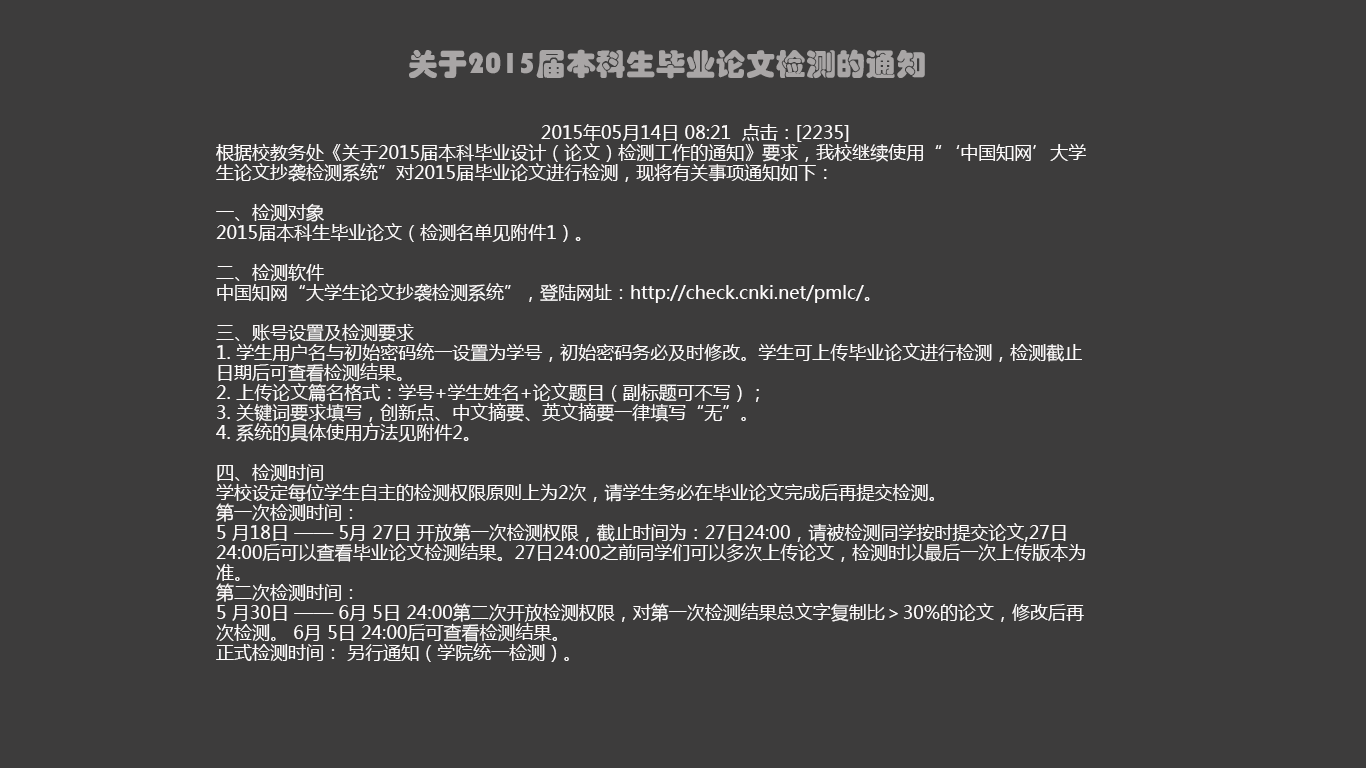
<style>
.page{position:relative;width:1366px;height:768px;background:#3d3c3c}
.page>*{position:absolute;margin:0}
.t1{font:30px "STHupo";color:#a9a6a6}
.t2{font:18px/20px "MicrosoftYaHei";color:#fefcfc}
</style>
<div class="page">
<p class="t1" style="left:409px;top:49px;width:516px;height:30px">关于2015届本科生毕业论文检测的通知</p>
<p class="t2" style="left:216px;top:124px;width:870px;height:538px">2015年05月14日 08:21  点击：[2235]<br>根据校教务处《关于2015届本科毕业设计（论文）检测工作的通知》要求，我校继续使用“‘中国知网’大学生论文抄袭检测系统”对2015届毕业论文进行检测，现将有关事项通知如下：<br> <br>一、检测对象<br>2015届本科生毕业论文（检测名单见附件1）。<br> <br>二、检测软件<br>中国知网“大学生论文抄袭检测系统”，登陆网址：http://check.cnki.net/pmlc/。<br> <br>三、账号设置及检测要求<br>1. 学生用户名与初始密码统一设置为学号，初始密码务必及时修改。学生可上传毕业论文进行检测，检测截止日期后可查看检测结果。<br>2. 上传论文篇名格式：学号+学生姓名+论文题目（副标题可不写）；<br>3. 关键词要求填写，创新点、中文摘要、英文摘要一律填写“无”。<br>4. 系统的具体使用方法见附件2。<br> <br>四、检测时间<br>学校设定每位学生自主的检测权限原则上为2次，请学生务必在毕业论文完成后再提交检测。<br>第一次检测时间：<br>5 月18日 —— 5月 27日 开放第一次检测权限，截止时间为：27日24:00，请被检测同学按时提交论文,27日24:00后可以查看毕业论文检测结果。27日24:00之前同学们可以多次上传论文，检测时以最后一次上传版本为准。<br>第二次检测时间：<br>5 月30日 —— 6月 5日 24:00第二次开放检测权限，对第一次检测结果总文字复制比＞30%的论文，修改后再次检测。 6月 5日 24:00后可查看检测结果。<br>正式检测时间： 另行通知（学院统一检测）。</p>
</div>
